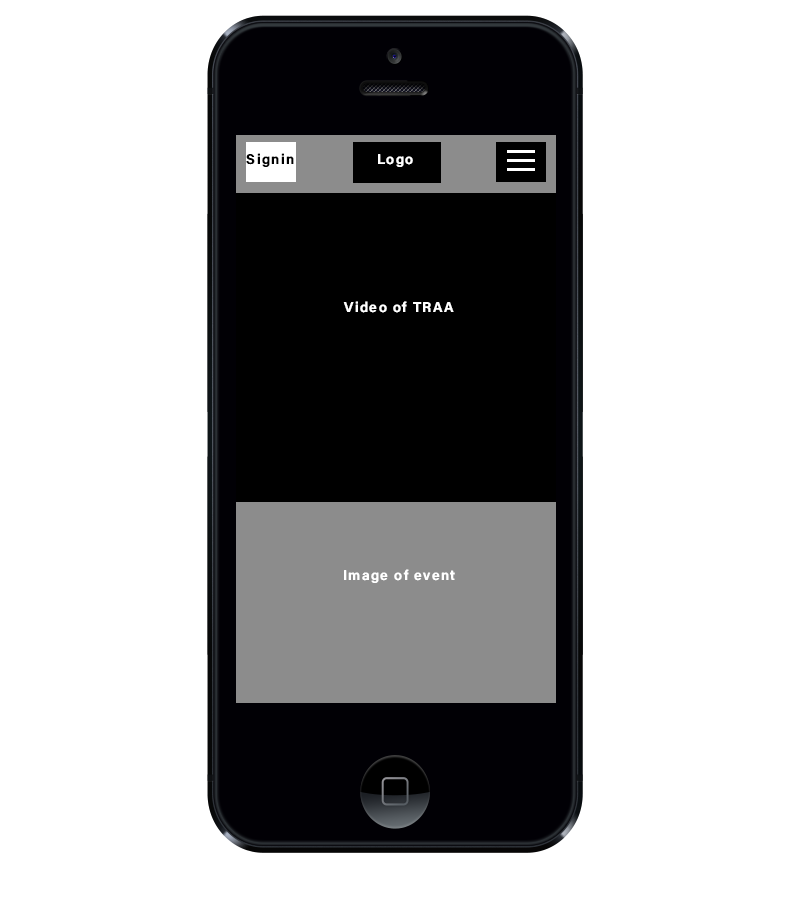
<style>
.page{position:relative;width:800px;height:900px;background:#ffffff}
.page>*{position:absolute;margin:0}
.t1{font:14px "AcuminConcept-Semibold";letter-spacing:0.1em;color:#000000}
.t2{font:14px "AcuminConcept-Semibold";letter-spacing:0.1em;color:#ffffff}
</style>
<div class="page">
<p class="t1" style="left:246px;top:153px;width:48px;height:14px">Signin</p>
<p class="t2" style="left:378px;top:154px;width:35px;height:13px">Logo</p>
<p class="t2" style="left:343px;top:301px;width:111px;height:12px">Video of TRAA</p>
<p class="t2" style="left:344px;top:569px;width:111px;height:14px">Image of event</p>
</div>
